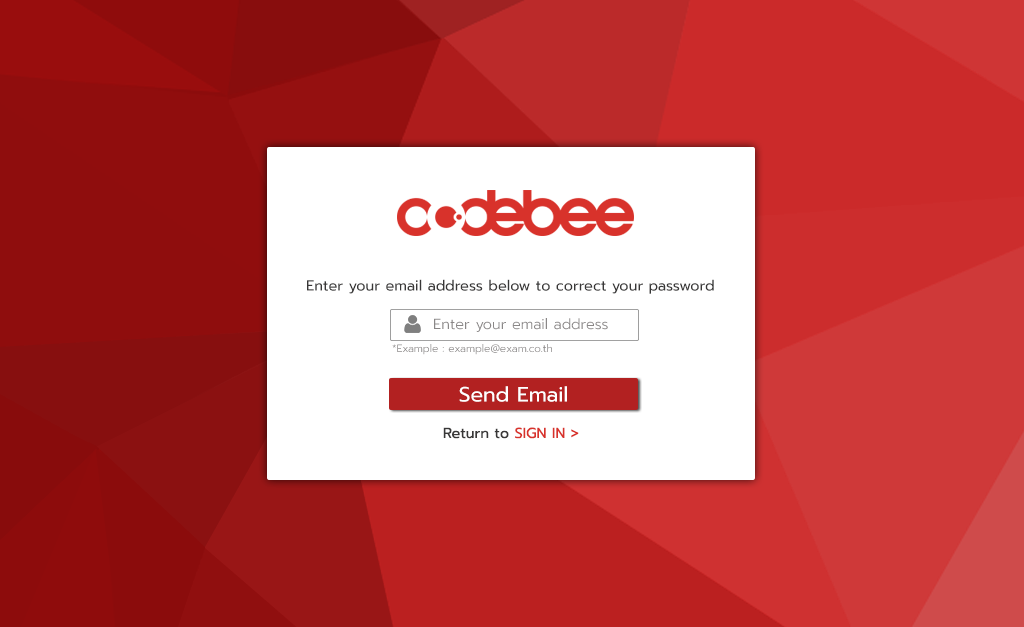
<style>
.page{position:relative;width:1024px;height:627px;background:#ffffff}
.page>*{position:absolute;margin:0}
.t1{font:14.6px "Prompt-Regular";color:#383737}
.t2{font:14.6px "Prompt-Light";color:#8a8787}
.t3{font:10.4px "Prompt-Light";color:#8a8787}
.t4{font:20.8px "Prompt-Regular";color:#ffffff}
.t5{font:14.6px "Prompt-Regular";color:#d8322b}
</style>
<div class="page">
<p class="t1" style="left:307px;top:279px;width:407px;height:15px">Enter your email address below to correct your password</p>
<p class="t2" style="left:434px;top:318px;width:174px;height:14px">Enter your email address</p>
<p class="t3" style="left:392px;top:344px;width:160px;height:11px">*Example : example@exam.co.th</p>
<p class="t4" style="left:459px;top:386px;width:108px;height:16px">Send Email</p>
<p class="t1" style="left:443px;top:427px;width:136px;height:12px">Return to <span class="t5">SIGN IN &gt;</span></p>
</div>
